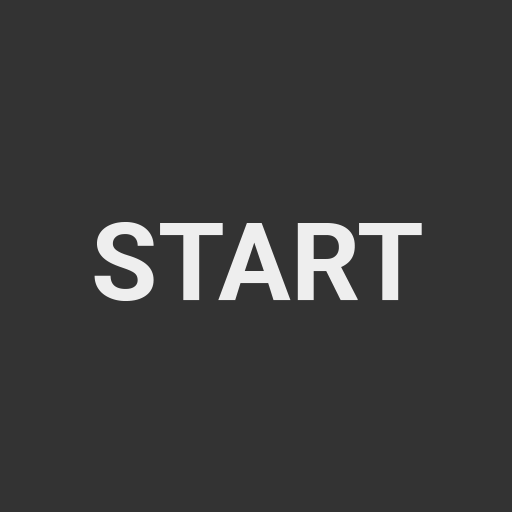
<style>
.page{position:relative;width:512px;height:512px;background:#333333}
.page>*{position:absolute;margin:0}
.t1{font:108px "Roboto-Bold";color:#eeeeee}
.t2{font:48px "TrebuchetMS";color:#eeeeee}
</style>
<div class="page">
<p class="t1" style="left:94px;top:222px;width:328px;height:79px"><span class="t2"><br><br><br></span>START</p>
</div>
